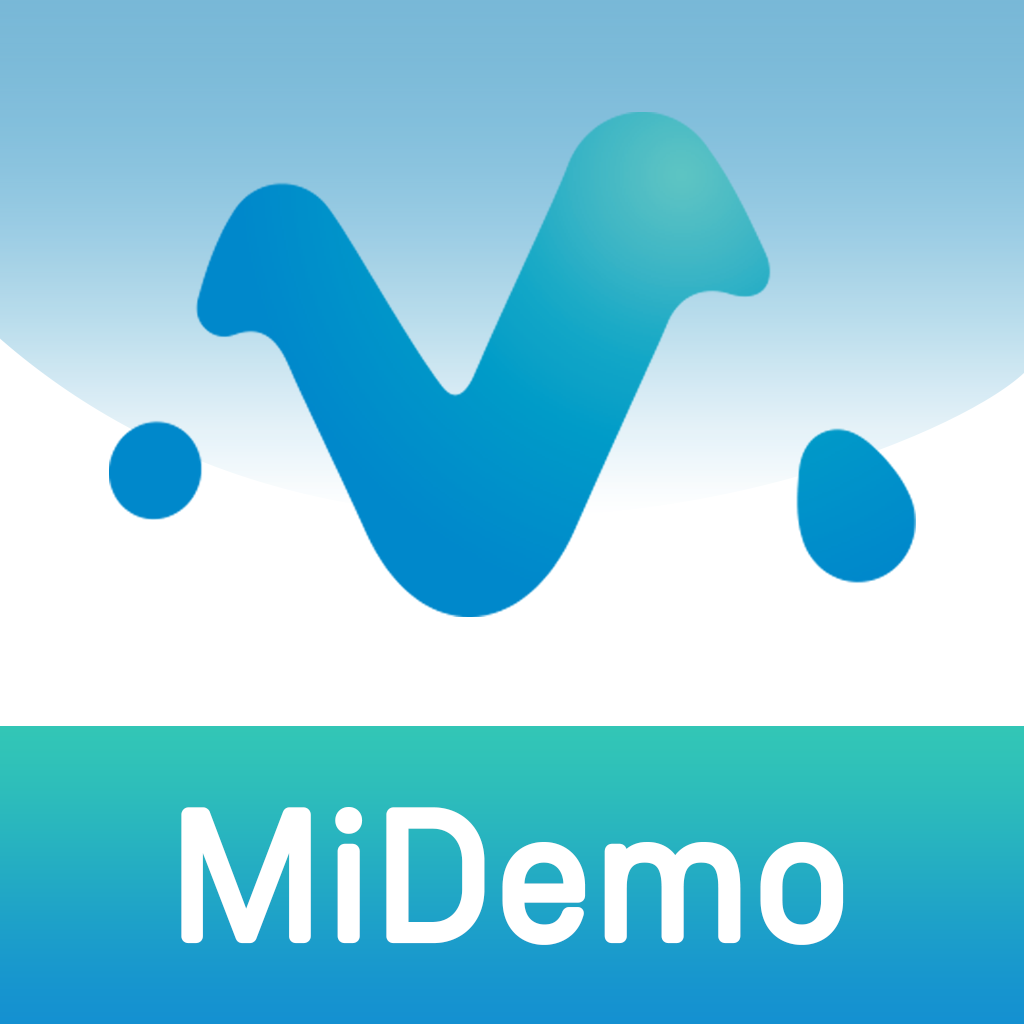
<style>
.page{position:relative;width:1024px;height:1024px;background:#ffffff}
.page>*{position:absolute;margin:0}
.t1{font:182.2px "WeissenhofGrotesk-Regular";color:#ffffff;font-weight:bold}
</style>
<div class="page">
<p class="t1" style="left:181px;top:807px;width:663px;height:138px">MiDemo</p>
</div>
